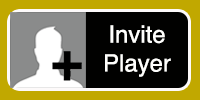
<style>
.page{position:relative;width:200px;height:100px;background:#010100}
.page>*{position:absolute;margin:0}
.t1{font:24px "Helvetica";color:#fffffd}
</style>
<div class="page">
<p class="t1" style="left:105px;top:25px;width:66px;height:52px;text-align:center">Invite<br>Player</p>
</div>
